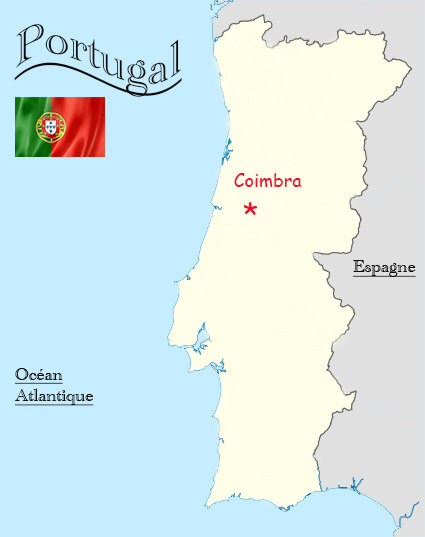
<style>
.page{position:relative;width:425px;height:537px;background:#c6ecff}
.page>*{position:absolute;margin:0}
.t1{font:48px "AcademyEngravedLetPlain";color:#0a0908;text-decoration:underline}
.t2{font:18px "ComicSansMS";color:#f20c2d}
.t3{font:30px "ComicSansMS";color:#f20c2d}
.t4{font:18px "AcademyEngravedLetPlain";color:#0a0908;text-decoration:underline}
</style>
<div class="page">
<p class="t1" style="left:14px;top:24px;width:168px;height:73px">Portugal</p>
<p class="t2" style="left:234px;top:173px;width:68px;height:14px">Coimbra</p>
<p class="t3" style="left:243px;top:202px;width:15px;height:13px">*</p>
<p class="t4" style="left:352px;top:260px;width:64px;height:17px">Espagne</p>
<p class="t4" style="left:14px;top:368px;width:80px;height:38px">Océan<br>Atlantique</p>
</div>
